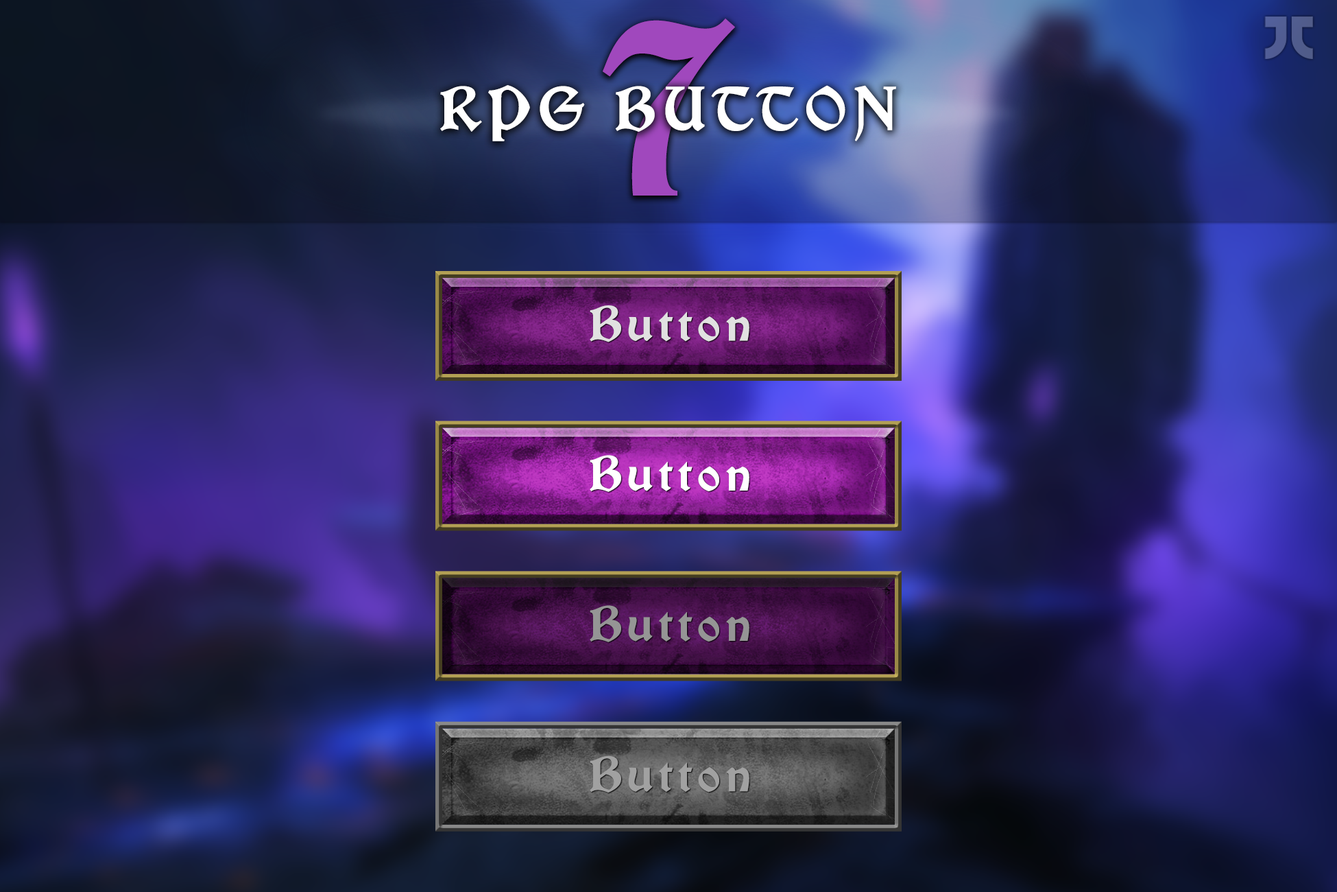
<style>
.page{position:relative;width:1337px;height:892px}
.page>*{position:absolute;margin:0}
.t1{font:233.2px "VinqueRg-Regular";letter-spacing:0.1em;color:#a048bd;font-variant:small-caps}
.t2{font:58.3px "VinqueRg-Regular";letter-spacing:0.1em;color:#ffffff}
.t3{font:46.6px "VinqueRg-Regular";letter-spacing:0.1em;color:#e1e1e1}
.t4{font:46.6px "VinqueRg-Regular";letter-spacing:0.1em;color:#ffffff}
.t5{font:46.6px "VinqueRg-Regular";letter-spacing:0.1em;color:#959595}
.t6{font:46.6px "VinqueRg-Regular";letter-spacing:0.1em;color:#a1a1a1}
</style>
<div class="page">
<p class="t1" style="left:603px;top:19px;width:132px;height:176px">7</p>
<p class="t2" style="left:440px;top:85px;width:456px;height:56px">RPG BUTTON</p>
<p class="t3" style="left:590px;top:305px;width:160px;height:37px">Button</p>
<p class="t4" style="left:590px;top:455px;width:160px;height:37px">Button</p>
<p class="t5" style="left:590px;top:605px;width:160px;height:37px">Button</p>
<p class="t6" style="left:590px;top:755px;width:160px;height:37px">Button</p>
</div>
